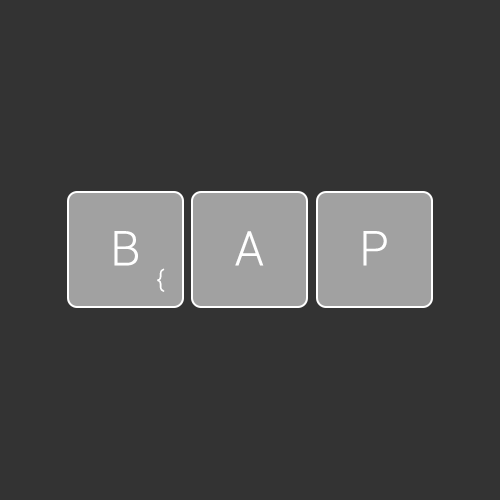
<style>
.page{position:relative;width:500px;height:500px;background:#333333}
.page>*{position:absolute;margin:0}
.t1{font:48px "Roboto-Light";color:#ffffff}
.t2{font:23.6px "Roboto-Light";color:#ffffff}
</style>
<div class="page">
<p class="t1" style="left:114px;top:231px;width:24px;height:35px">B</p>
<p class="t1" style="left:235px;top:231px;width:29px;height:35px">A</p>
<p class="t1" style="left:363px;top:231px;width:24px;height:35px">P</p>
<p class="t2" style="left:157px;top:268px;width:8px;height:24px">{</p>
</div>
